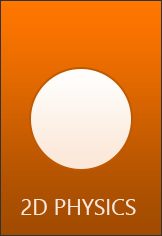
<style>
.page{position:relative;width:162px;height:236px}
.page>*{position:absolute;margin:0}
.t1{font:22px "SegoeUI";color:#fbe8d8}
</style>
<div class="page">
<p class="t1" style="left:21px;top:199px;width:115px;height:16px">2D PHYSICS</p>
</div>
